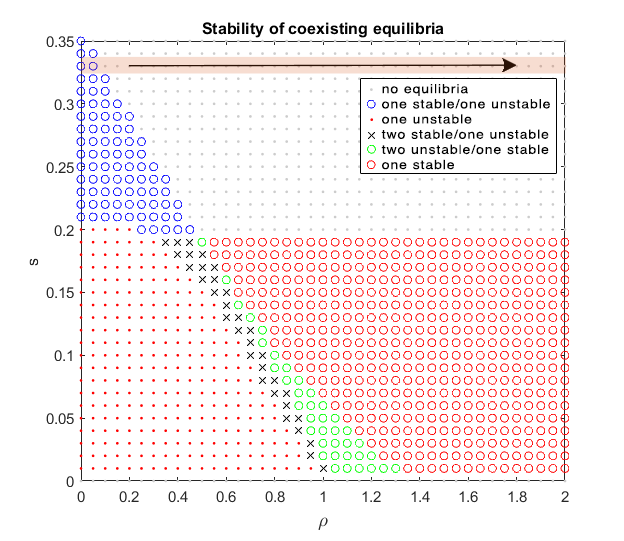
<style>
.page{position:relative;width:624px;height:541px;background:#ffffff}
.page>*{position:absolute;margin:0}
.t1{font:12.6px "Helvetica";letter-spacing:0.065em;color:#000000;scale:1.11 1}
</style>
<div class="page">
<p class="t1" style="left:381px;top:84px;width:169px;height:86px">no equilibria<br>one stable/one unstable<br>one unstable<br>two stable/one unstable<br>two unstable/one stable<br>one stable</p>
</div>
